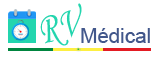
<style>
.page{position:relative;width:160px;height:60px;background:#ffffff}
.page>*{position:absolute;margin:0}
.t1{font:44.6px "MonotypeCorsiva";color:#23d5ae;scale:0.76 1}
.t2{font:20.6px "ArialMT";color:#42578b}
</style>
<div class="page">
<p class="t1" style="left:40px;top:3px;width:42px;height:43px;rotate:-13deg">RV</p>
<p class="t2" style="left:81px;top:28px;width:69px;height:15px">Médical</p>
</div>
